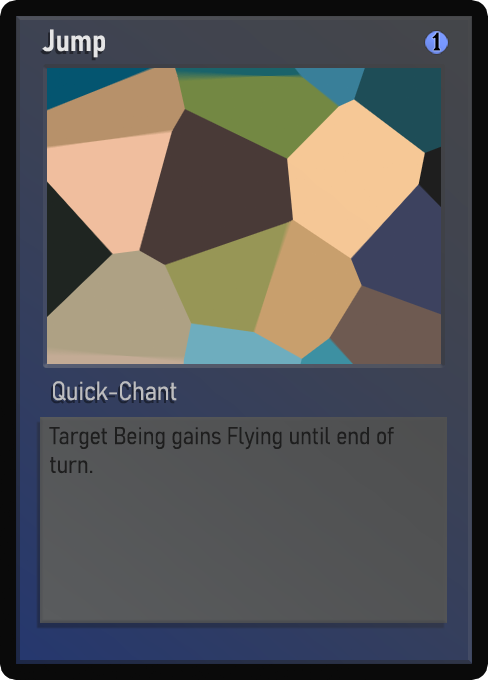
<style>
.page{position:relative;width:488px;height:680px}
.page>*{position:absolute;margin:0}
.t1{font:30px "Bahnschrift-SemiBoldSemiCondensed";color:#f2f2f2;font-weight:bold}
.t2{font:25px "WTRRoycroft";color:#000000;font-weight:bold;scale:1.09 1}
.t3{font:26px "Bahnschrift-LightSemiCondensed";color:#c8c8c8;font-weight:bold}
.t4{font:24px "Bahnschrift-LightSemiCondensed";color:#1e1e1e;font-weight:bold}
</style>
<div class="page">
<p class="t1" style="left:42px;top:29px;width:63px;height:29px;opacity:0.9">Jump</p>
<p class="t2" style="left:432px;top:32px;width:9px;height:19px">1</p>
<p class="t3" style="left:53px;top:381px;width:124px;height:20px;opacity:0.9">Quick-Chant</p>
<p class="t4" style="left:49px;top:427px;width:345px;height:47px">Target Being gains Flying until end of turn.</p>
</div>
